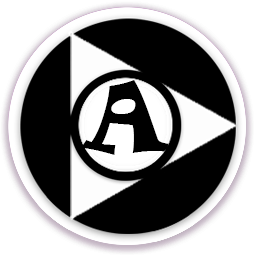
<style>
.page{position:relative;width:256px;height:256px;background:#000000}
.page>*{position:absolute;margin:0}
.t1{font:90px "Ravie";color:#000000}
</style>
<div class="page">
<p class="t1" style="left:81px;top:80px;width:88px;height:75px">A</p>
</div>
